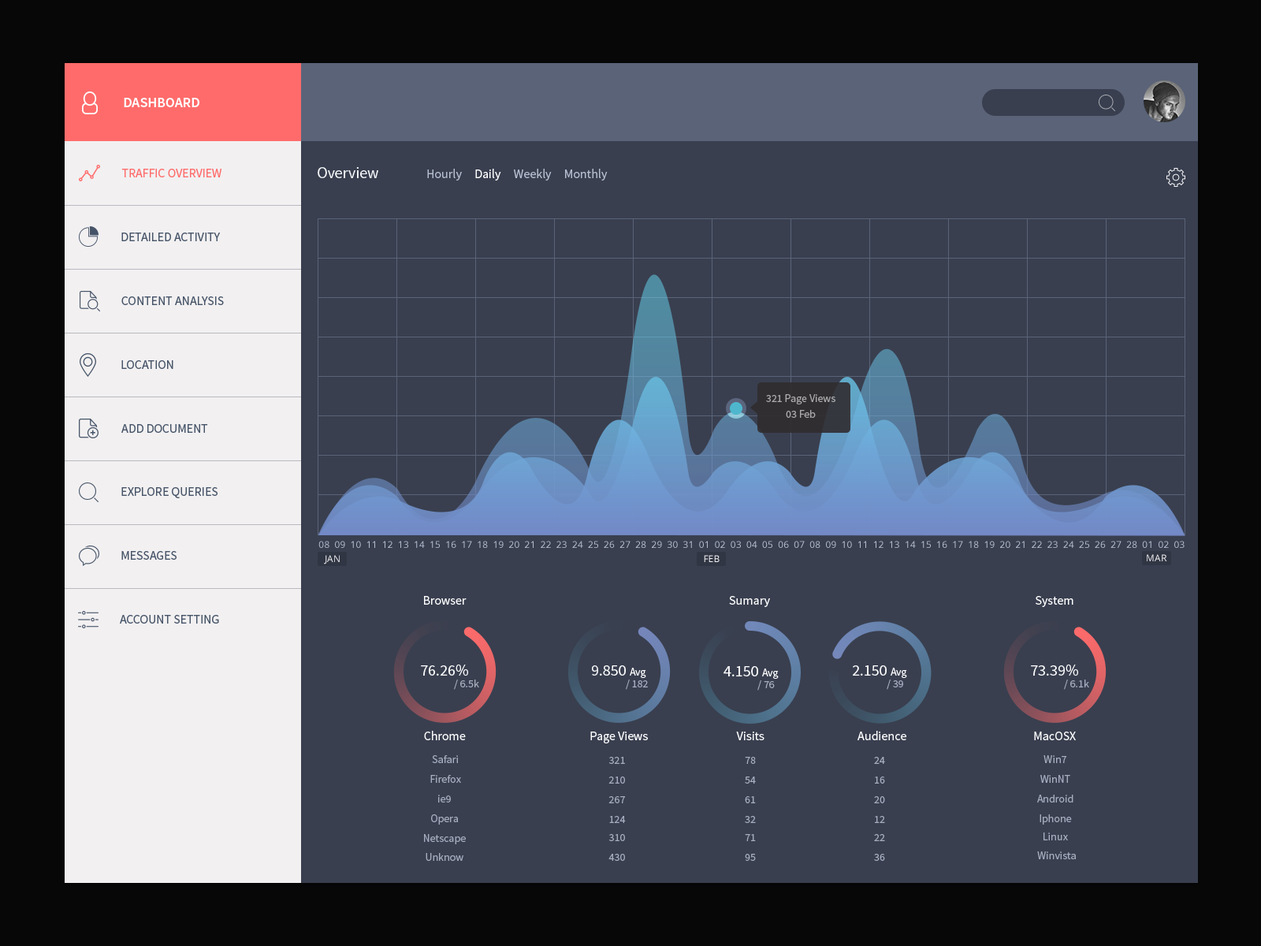
<style>
.page{position:relative;width:1261px;height:946px;background:#393f4f}
.page>*{position:absolute;margin:0}
.t1{font:14.2px "SourceSansPro-Semibold";color:#f3f3f3}
.t2{font:12.6px "SourceSansPro-Regular";color:#ff6b6b}
.t3{font:12.6px "SourceSansPro-Regular";color:#b6bfd0}
.t4{font:15.8px "SourceSansPro-Regular";color:#fbfdfe}
.t5{font:12.6px "SourceSansPro-Regular";color:#ffffff}
.t6{font:12.6px "SourceSansPro-Regular";color:#465468}
.t7{font:11px "SourceSansPro-Regular";color:#adabad}
.t8{font:9.5px "OpenSans";letter-spacing:0.002em;color:#b6bfd0}
.t9{font:9.5px "OpenSans";letter-spacing:0.002em;color:#f3f3f3}
.t10{font:15.8px "SourceSansPro-Regular";color:#ffffff}
.t11{font:11px "SourceSansPro-Regular";color:#ffffff}
.t12{font:11px "SourceSansPro-Regular";color:#a6aebf}
</style>
<div class="page">
<p class="t1" style="left:124px;top:98px;width:75px;height:9px">DASHBOARD</p>
<p class="t2" style="left:121px;top:169px;width:100px;height:8px">TRAFFIC OVERVIEW</p>
<p class="t3" style="left:318px;top:167px;width:290px;height:13px"><span class="t4">Overview               </span>Hourly     <span class="t5">Daily  </span>   Weekly     Monthly</p>
<p class="t6" style="left:121px;top:232px;width:99px;height:9px">DETAILED ACTIVITY</p>
<p class="t6" style="left:121px;top:296px;width:103px;height:9px">CONTENT ANALYSIS</p>
<p class="t6" style="left:121px;top:360px;width:52px;height:9px">LOCATION</p>
<p class="t7" style="left:766px;top:394px;width:69px;height:10px">321 Page Views</p>
<p class="t7" style="left:786px;top:410px;width:30px;height:8px">03 Feb</p>
<p class="t6" style="left:121px;top:424px;width:87px;height:9px">ADD DOCUMENT</p>
<p class="t6" style="left:121px;top:487px;width:97px;height:11px">EXPLORE QUERIES</p>
<p class="t8" style="left:318px;top:541px;width:866px;height:7px">08  09  10  11  12  13  14  15  16  17  18  19  20  21  22  23  24  25  26  27  28  29  30  31  01  02  03  04  05  06  07  08  09  10  11  12  13  14  15  16  17  18  19  20  21  22  23  24  25  26  27  28  01  02  03</p>
<p class="t6" style="left:121px;top:551px;width:56px;height:9px">MESSAGES</p>
<p class="t9" style="left:324px;top:555px;width:16px;height:9px">JAN</p>
<p class="t9" style="left:704px;top:555px;width:16px;height:7px">FEB</p>
<p class="t9" style="left:1147px;top:554px;width:20px;height:7px">MAR</p>
<p class="t5" style="left:424px;top:596px;width:43px;height:8px">Browser</p>
<p class="t5" style="left:729px;top:596px;width:41px;height:11px">Sumary</p>
<p class="t5" style="left:1036px;top:596px;width:37px;height:11px">System</p>
<p class="t6" style="left:120px;top:615px;width:99px;height:8px">ACCOUNT SETTING</p>
<p class="t10" style="left:421px;top:664px;width:47px;height:11px">76.26%</p>
<p class="t10" style="left:592px;top:665px;width:54px;height:13px">9.850 <span class="t11">Avg</span></p>
<p class="t10" style="left:723px;top:666px;width:56px;height:13px">4.150 <span class="t11">Avg</span></p>
<p class="t10" style="left:853px;top:665px;width:54px;height:13px">2.150 <span class="t11">Avg</span></p>
<p class="t10" style="left:1031px;top:664px;width:47px;height:11px">73.39%</p>
<p class="t12" style="left:454px;top:679px;width:25px;height:11px">/ 6.5k</p>
<p class="t12" style="left:626px;top:679px;width:22px;height:11px">/ 182</p>
<p class="t12" style="left:757px;top:680px;width:18px;height:10px">/ 76</p>
<p class="t12" style="left:887px;top:679px;width:16px;height:11px">/ 39</p>
<p class="t12" style="left:1064px;top:679px;width:25px;height:11px">/ 6.1k</p>
<p class="t5" style="left:424px;top:731px;width:42px;height:9px">Chrome</p>
<p class="t5" style="left:590px;top:731px;width:58px;height:12px">Page Views</p>
<p class="t5" style="left:736px;top:731px;width:28px;height:9px">Visits</p>
<p class="t5" style="left:857px;top:731px;width:49px;height:9px">Audience</p>
<p class="t5" style="left:1034px;top:731px;width:42px;height:9px">MacOSX</p>
<p class="t12" style="left:432px;top:755px;width:26px;height:8px">Safari</p>
<p class="t12" style="left:608px;top:757px;width:17px;height:7px">321</p>
<p class="t12" style="left:745px;top:757px;width:11px;height:7px">78</p>
<p class="t12" style="left:874px;top:757px;width:11px;height:7px">24</p>
<p class="t12" style="left:1043px;top:755px;width:24px;height:8px">Win7</p>
<p class="t12" style="left:430px;top:775px;width:31px;height:8px">Firefox</p>
<p class="t12" style="left:608px;top:776px;width:17px;height:7px">210</p>
<p class="t12" style="left:745px;top:776px;width:11px;height:7px">54</p>
<p class="t12" style="left:875px;top:776px;width:10px;height:7px">16</p>
<p class="t12" style="left:1040px;top:775px;width:30px;height:8px">WinNT</p>
<p class="t12" style="left:438px;top:794px;width:13px;height:8px">ie9</p>
<p class="t12" style="left:608px;top:796px;width:18px;height:7px">267</p>
<p class="t12" style="left:745px;top:796px;width:11px;height:7px">61</p>
<p class="t12" style="left:874px;top:796px;width:11px;height:7px">20</p>
<p class="t12" style="left:1037px;top:794px;width:36px;height:8px">Android</p>
<p class="t12" style="left:431px;top:814px;width:27px;height:10px">Opera</p>
<p class="t12" style="left:609px;top:816px;width:17px;height:7px">124</p>
<p class="t12" style="left:745px;top:816px;width:11px;height:7px">32</p>
<p class="t12" style="left:875px;top:816px;width:10px;height:7px">12</p>
<p class="t12" style="left:1039px;top:814px;width:33px;height:10px">Iphone</p>
<p class="t12" style="left:424px;top:834px;width:42px;height:10px">Netscape</p>
<p class="t12" style="left:608px;top:834px;width:17px;height:7px">310</p>
<p class="t12" style="left:745px;top:834px;width:11px;height:7px">71</p>
<p class="t12" style="left:874px;top:834px;width:11px;height:7px">22</p>
<p class="t12" style="left:1043px;top:832px;width:25px;height:8px">Linux</p>
<p class="t12" style="left:426px;top:853px;width:37px;height:8px">Unknow</p>
<p class="t12" style="left:608px;top:853px;width:17px;height:8px">430</p>
<p class="t12" style="left:745px;top:853px;width:11px;height:8px">95</p>
<p class="t12" style="left:874px;top:853px;width:11px;height:8px">36</p>
<p class="t12" style="left:1037px;top:851px;width:39px;height:8px">Winvista</p>
</div>
